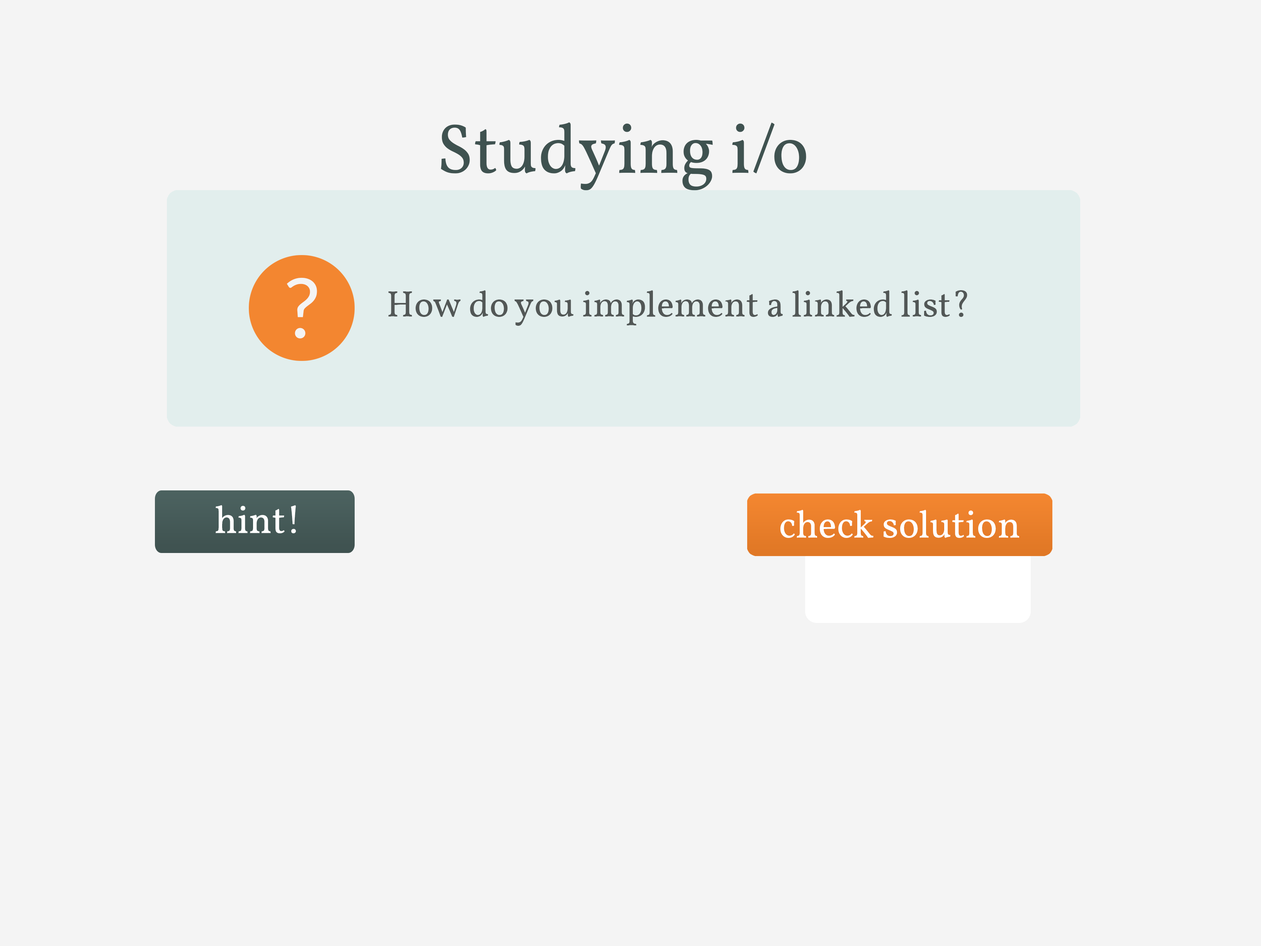
<style>
.page{position:relative;width:1261px;height:946px;background:#f4f4f4}
.page>*{position:absolute;margin:0}
.t1{font:70.4px "Vollkorn-Regular";color:#3f5250}
.t2{font:82.8px "Lato-Regular";color:#f4f4f4}
.t3{font:36.7px "Vollkorn-Regular";color:#525756}
.t4{font:38.7px "Vollkorn-Regular";color:#ffffff}
.t5{font:38.6px "Vollkorn-Regular";color:#ffffff}
</style>
<div class="page">
<p class="t1" style="left:441px;top:122px;width:365px;height:68px">Studying i/o</p>
<p class="t2" style="left:287px;top:277px;width:30px;height:61px">?</p>
<p class="t3" style="left:388px;top:290px;width:579px;height:36px">How do you implement a linked list?</p>
<p class="t4" style="left:216px;top:505px;width:80px;height:28px">hint!</p>
<p class="t5" style="left:780px;top:510px;width:239px;height:28px">check solution</p>
</div>
